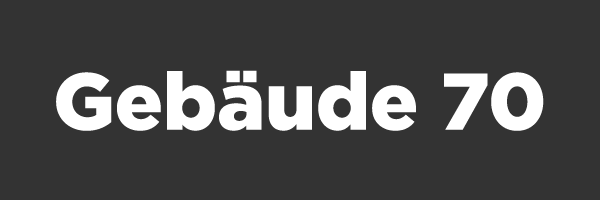
<style>
.page{position:relative;width:600px;height:200px;background:#333333}
.page>*{position:absolute;margin:0}
.t1{font:80px "Gotham-Black";color:#ffffff}
</style>
<div class="page">
<p class="t1" style="left:56px;top:70px;width:488px;height:61px">Gebäude 70</p>
</div>
